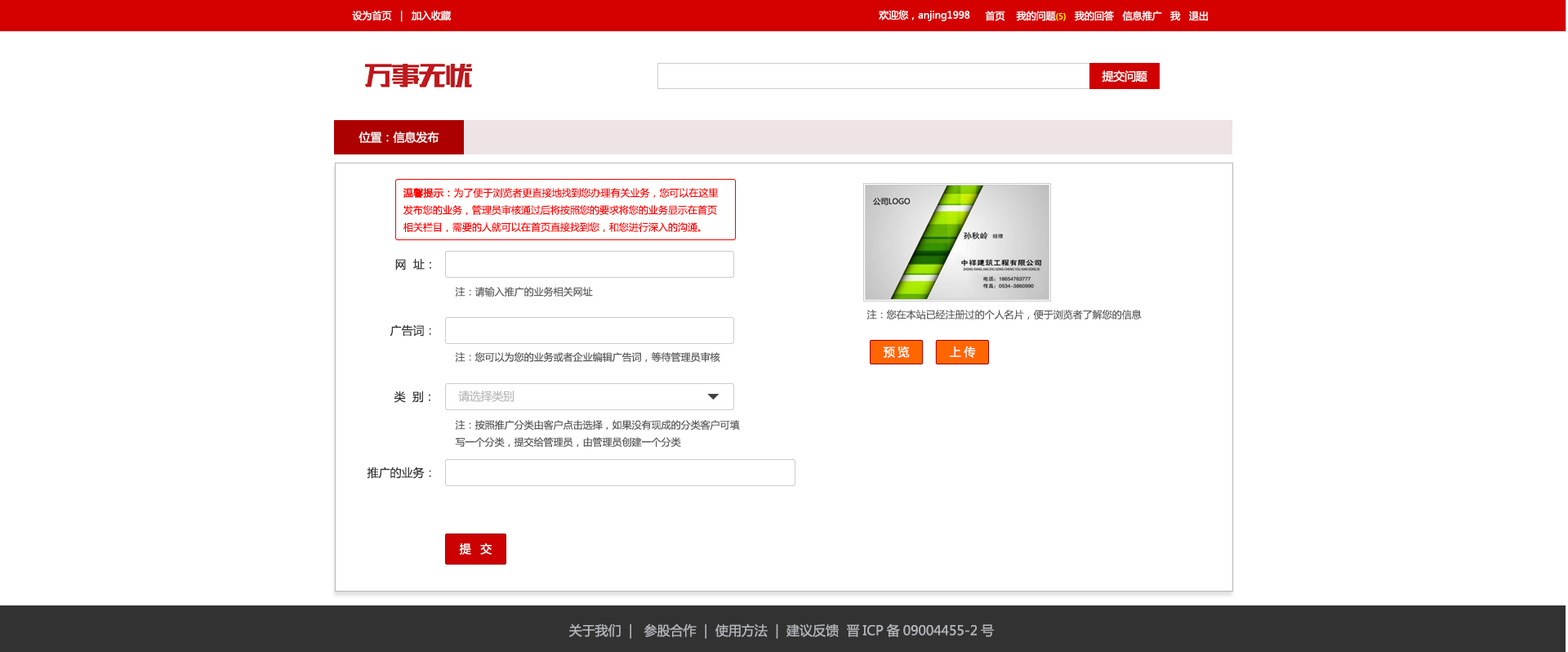
<style>
.page{position:relative;width:1568px;height:652px;background:#ffffff}
.page>*{position:absolute;margin:0}
.t1{font:9.8px "MicrosoftYaHei";color:#ffffff}
.t2{font:8.2px "MicrosoftYaHei";color:#fff600}
.t3{font:11.4px "MicrosoftYaHei";letter-spacing:-0.02em;color:#ffffff}
.t4{font:11.4px "MicrosoftYaHei";color:#ffffff}
.t5{font:9.8px "MicrosoftYaHei";color:#ff0000}
.t6{font:9.8px "MicrosoftYaHei";color:#ff0000;font-weight:bold}
.t7{font:11.4px "MicrosoftYaHei";color:#333333}
.t8{font:9.8px "MicrosoftYaHei";color:#616161}
.t9{font:9.8px "MicrosoftYaHei";color:#5a5a5a}
.t10{font:11.4px "MicrosoftYaHei";letter-spacing:0.26em;color:#ffffff}
.t11{font:11.4px "MicrosoftYaHei";letter-spacing:-0.02em;color:#bebebe}
.t12{font:13.1px "MicrosoftYaHei";color:#b3b5ba}
</style>
<div class="page">
<p class="t1" style="left:352px;top:11px;width:99px;height:11px">设为首页   |   加入收藏</p>
<p class="t1" style="left:879px;top:10px;width:91px;height:11px">欢迎您，anjing1998</p>
<p class="t1" style="left:985px;top:11px;width:223px;height:10px">首页    我的问题<span class="t2">(5)  </span> 我的回答   信息推广   我   退出</p>
<p class="t3" style="left:1102px;top:70px;width:45px;height:12px">提交问题</p>
<p class="t4" style="left:359px;top:131px;width:80px;height:12px">位置：信息发布</p>
<p class="t5" style="left:403px;top:188px;width:316px;height:44px"><span class="t6">温馨提示：</span>为了便于浏览者更直接地找到您办理有关业务，您可以在这里<br>发布您的业务，管理员审核通过后将按照您的要求将您的业务显示在首页<br>相关栏目，需要的人就可以在首页直接找到您，和您进行深入的沟通。</p>
<p class="t7" style="left:395px;top:258px;width:36px;height:12px">网  址：</p>
<p class="t8" style="left:455px;top:287px;width:138px;height:9px"><span class="t9">注：</span>请输入推广的业务相关网址</p>
<p class="t8" style="left:866px;top:310px;width:276px;height:9px"><span class="t9">注：</span>您在本站已经注册过的个人名片，便于浏览者了解您的信息</p>
<p class="t7" style="left:390px;top:324px;width:41px;height:12px">广告词：</p>
<p class="t9" style="left:455px;top:352px;width:265px;height:11px">注：您可以为您的业务或者企业编辑广告词，等待管理员审核</p>
<p class="t10" style="left:884px;top:346px;width:26px;height:12px">预览</p>
<p class="t10" style="left:950px;top:346px;width:26px;height:12px">上传</p>
<p class="t7" style="left:394px;top:390px;width:36px;height:13px">类  别：</p>
<p class="t11" style="left:458px;top:390px;width:56px;height:12px">请选择类别</p>
<p class="t9" style="left:455px;top:420px;width:285px;height:28px">注：按照推广分类由客户点击选择，如果没有现成的分类客户可填<br>写一个分类，提交给管理员，由管理员创建一个分类</p>
<p class="t7" style="left:367px;top:466px;width:64px;height:13px">推广的业务：</p>
<p class="t10" style="left:459px;top:543px;width:33px;height:12px">提 交</p>
<p class="t12" style="left:568px;top:623px;width:426px;height:16px">关于我们  |   参股合作  |  使用方法  |  建议反馈  晋ICP备09004455-2号</p>
</div>
